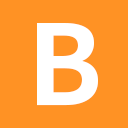
<style>
.page{position:relative;width:128px;height:128px;background:#ff9224}
.page>*{position:absolute;margin:0}
.t1{font:111px "NotoSansCJKtc-Bold";color:#ffffff}
</style>
<div class="page">
<p class="t1" style="left:37px;top:23px;width:61px;height:83px">B</p>
</div>
